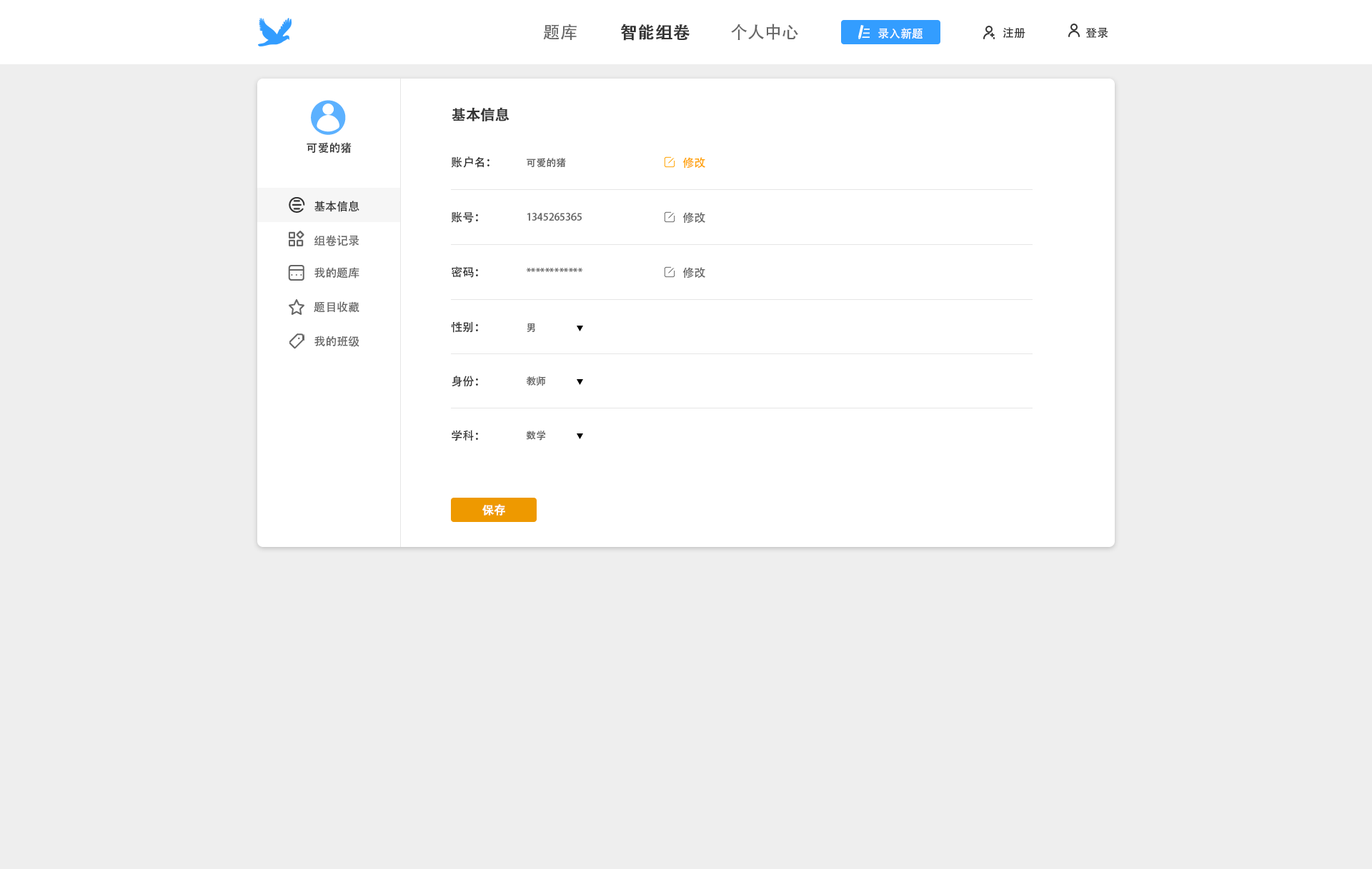
<style>
.page{position:relative;width:1372px;height:869px;background:#eeeeee}
.page>*{position:absolute;margin:0}
.t1{font:17.1px "AdobeHeitiStd-Regular";color:#666666}
.t2{font:17.1px "AdobeHeitiStd-Regular";color:#333333;font-weight:bold}
.t3{font:11.4px "AdobeHeitiStd-Regular";color:#ffffff}
.t4{font:11.4px "AdobeHeitiStd-Regular";color:#333333}
.t5{font:14.3px "AdobeHeitiStd-Regular";color:#333333;font-weight:bold}
.t6{font:10px "AdobeHeitiStd-Regular";color:#666666}
.t7{font:11.4px "AdobeHeitiStd-Regular";color:#ffa200}
.t8{font:11.4px "AdobeHeitiStd-Regular";color:#666666}
.t9{font:11.4px "AdobeHeitiStd-Regular";color:#ffffff;font-weight:bold}
</style>
<div class="page">
<p class="t1" style="left:543px;top:24px;width:33px;height:16px">题库</p>
<p class="t2" style="left:621px;top:24px;width:68px;height:17px">智能组卷</p>
<p class="t1" style="left:731px;top:24px;width:67px;height:16px">个人中心</p>
<p class="t3" style="left:878px;top:28px;width:44px;height:11px">录入新题</p>
<p class="t4" style="left:1002px;top:27px;width:23px;height:12px">注册</p>
<p class="t4" style="left:1085px;top:27px;width:23px;height:12px">登录</p>
<p class="t5" style="left:451px;top:107px;width:58px;height:14px">基本信息</p>
<p class="t4" style="left:306px;top:142px;width:45px;height:12px">可爱的猪</p>
<p class="t4" style="left:451px;top:156px;width:38px;height:12px">账户名：</p>
<p class="t6" style="left:526px;top:158px;width:40px;height:10px">可爱的猪</p>
<p class="t7" style="left:682px;top:157px;width:23px;height:12px">修改</p>
<p class="t4" style="left:314px;top:201px;width:45px;height:11px">基本信息</p>
<p class="t4" style="left:451px;top:211px;width:27px;height:12px">账号：</p>
<p class="t6" style="left:526px;top:213px;width:55px;height:8px">1345265365</p>
<p class="t8" style="left:682px;top:212px;width:23px;height:12px">修改</p>
<p class="t8" style="left:314px;top:235px;width:45px;height:11px">组卷记录</p>
<p class="t8" style="left:314px;top:267px;width:45px;height:12px">我的题库</p>
<p class="t4" style="left:451px;top:266px;width:27px;height:12px">密码：</p>
<p class="t6" style="left:526px;top:268px;width:56px;height:4px">************</p>
<p class="t8" style="left:682px;top:267px;width:23px;height:12px">修改</p>
<p class="t8" style="left:314px;top:301px;width:45px;height:12px">题目收藏</p>
<p class="t4" style="left:451px;top:321px;width:27px;height:12px">性别：</p>
<p class="t6" style="left:526px;top:323px;width:9px;height:9px">男</p>
<p class="t8" style="left:314px;top:336px;width:45px;height:11px">我的班级</p>
<p class="t4" style="left:451px;top:376px;width:27px;height:11px">身份：</p>
<p class="t6" style="left:526px;top:376px;width:20px;height:10px">教师</p>
<p class="t4" style="left:451px;top:430px;width:27px;height:11px">学科：</p>
<p class="t6" style="left:526px;top:431px;width:19px;height:10px">数学</p>
<p class="t9" style="left:482px;top:504px;width:23px;height:12px">保存</p>
</div>
